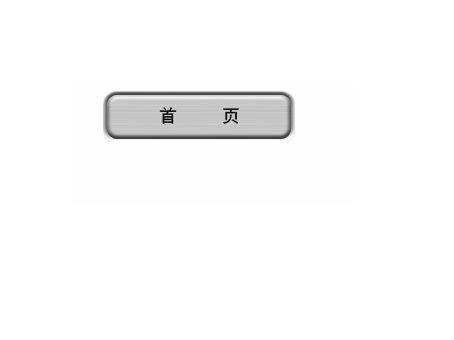
<style>
.page{position:relative;width:454px;height:340px;background:#ffffff}
.page>*{position:absolute;margin:0}
.t1{font:18px "SimHei";color:#010101}
</style>
<div class="page">
<p class="t1" style="left:159px;top:107px;width:80px;height:17px">首     页</p>
</div>
